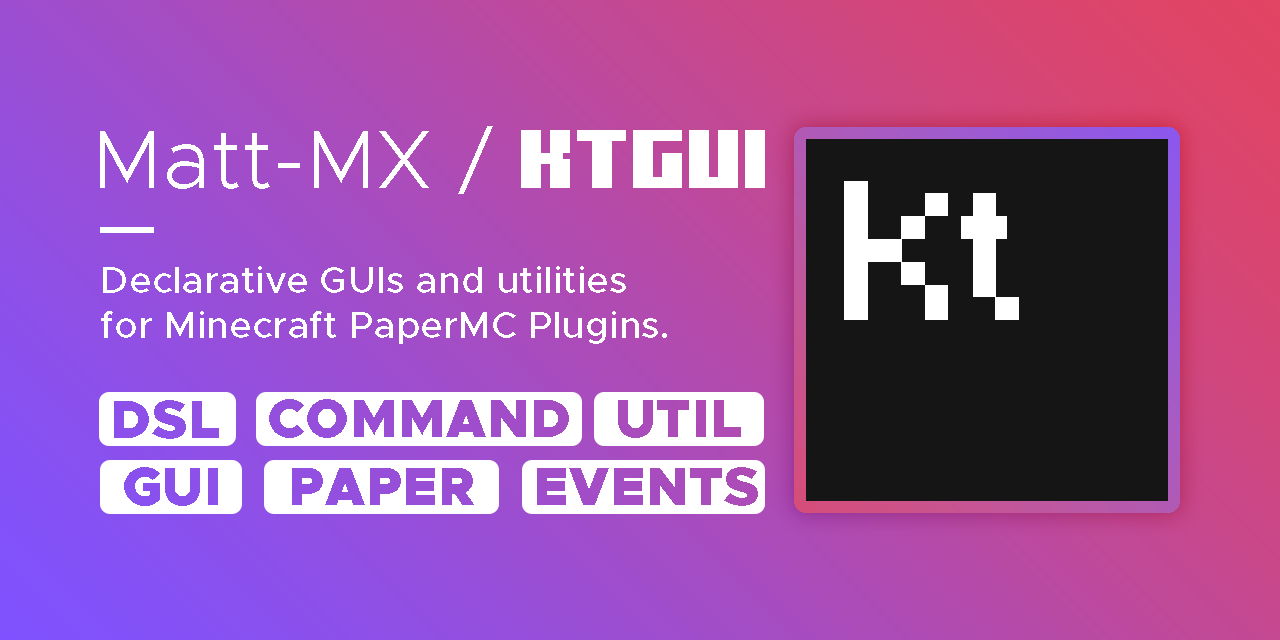
<style>
.page{position:relative;width:1280px;height:640px}
.page>*{position:absolute;margin:0}
.t1{font:83.3px "Metropolis-Light";letter-spacing:0.01em;color:#ffffff}
.t2{font:83.3px "MinecraftFiftySolid";letter-spacing:0.01em;color:#ffffff}
.t3{font:37.5px "Metropolis-Medium";letter-spacing:0.01em;color:#ffffff}
</style>
<div class="page">
<p class="t1" style="left:100px;top:126px;width:665px;height:68px">Matt-MX / <span class="t2">KTGui</span></p>
<p class="t3" style="left:101px;top:266px;width:566px;height:78px">Declarative GUIs and utilities <br>for Minecraft PaperMC Plugins.</p>
</div>
